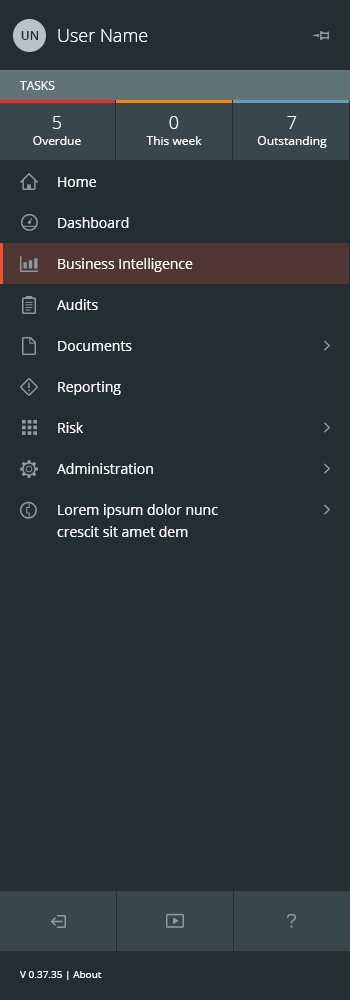
<style>
.page{position:relative;width:350px;height:1000px;background:#222e32}
.page>*{position:absolute;margin:0}
.t1{font:18px "OpenSans-Light";color:#ffffff}
.t2{font:12px "OpenSans-Semibold";color:#222e32}
.t3{font:12px "OpenSans";color:#ffffff}
.t4{font:12px/16px "OpenSans";color:#ffffff}
.t5{font:18px/16px "OpenSans-Light";color:#ffffff}
.t6{font:14px "OpenSans";color:#ffffff}
.t7{font:14px/16px "OpenSans";color:#ffffff}
.t8{font:10px "OpenSans";color:#ffffff}
</style>
<div class="page">
<p class="t1" style="left:58px;top:29px;width:90px;height:13px">User Name</p>
<p class="t2" style="left:21px;top:31px;width:18px;height:9px">UN</p>
<p class="t3" style="left:20px;top:81px;width:35px;height:9px">TASKS</p>
<p class="t4" style="left:33px;top:116px;width:48px;height:29px;text-align:center"><span class="t5">5<br></span>Overdue</p>
<p class="t4" style="left:146px;top:116px;width:56px;height:29px;text-align:center"><span class="t5">0<br></span>This week</p>
<p class="t4" style="left:257px;top:116px;width:70px;height:32px;text-align:center"><span class="t5">7<br></span>Outstanding</p>
<p class="t6" style="left:58px;top:177px;width:38px;height:10px">Home</p>
<p class="t6" style="left:58px;top:217px;width:71px;height:11px">Dashboard</p>
<p class="t6" style="left:58px;top:258px;width:135px;height:14px">Business Intelligence</p>
<p class="t6" style="left:57px;top:299px;width:41px;height:11px">Audits</p>
<p class="t6" style="left:58px;top:341px;width:74px;height:10px">Documents</p>
<p class="t6" style="left:58px;top:381px;width:63px;height:14px">Reporting</p>
<p class="t6" style="left:58px;top:422px;width:25px;height:11px">Risk</p>
<p class="t6" style="left:57px;top:463px;width:96px;height:11px">Administration</p>
<p class="t7" style="left:57px;top:504px;width:161px;height:33px">Lorem ipsum dolor nunc <br>crescit sit amet dem</p>
<p class="t8" style="left:20px;top:971px;width:82px;height:9px">V 0.37.35 | About</p>
</div>
